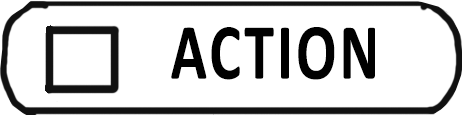
<style>
.page{position:relative;width:462px;height:115px;background:#ffffff}
.page>*{position:absolute;margin:0}
.t1{font:80px "Calibri-Bold";letter-spacing:0.05em;color:#000000;scale:0.75 1}
</style>
<div class="page">
<p class="t1" style="left:171px;top:27px;width:204px;height:53px">ACTION</p>
</div>
